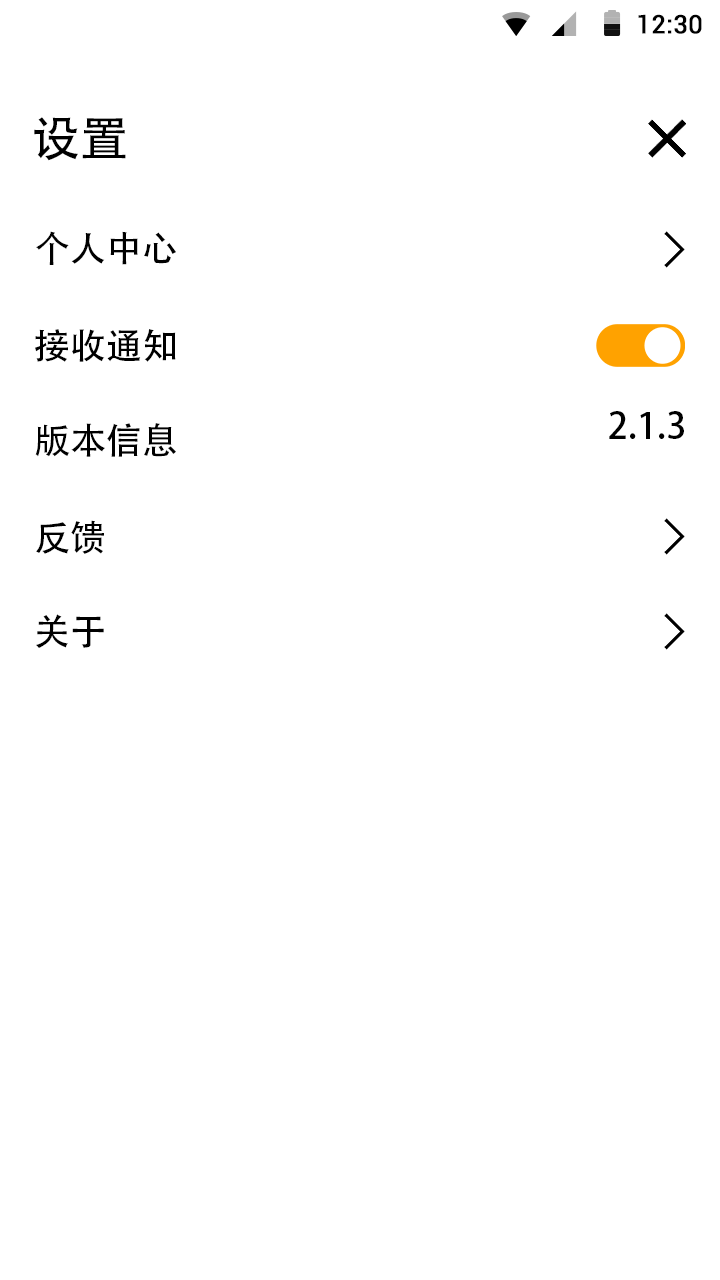
<style>
.page{position:relative;width:720px;height:1280px;background:#ffffff}
.page>*{position:absolute;margin:0}
.t1{font:25.4px "Roboto-Regular";color:#000000;font-weight:bold}
.t2{font:48px "AdobeHeitiStd-Regular";letter-spacing:-0.004em;color:#000000}
.t3{font:36px "AdobeHeitiStd-Regular";letter-spacing:-0.004em;color:#000000}
</style>
<div class="page">
<p class="t1" style="left:638px;top:14px;width:64px;height:20px">12:30</p>
<p class="t2" style="left:34px;top:117px;width:92px;height:44px">设置</p>
<p class="t3" style="left:36px;top:231px;width:140px;height:34px">个人中心</p>
<p class="t3" style="left:35px;top:329px;width:141px;height:33px">接收通知</p>
<p class="t3" style="left:609px;top:411px;width:75px;height:28px">2.1.3</p>
<p class="t3" style="left:35px;top:423px;width:141px;height:34px">版本信息</p>
<p class="t3" style="left:36px;top:520px;width:68px;height:34px">反馈</p>
<p class="t3" style="left:36px;top:614px;width:68px;height:34px">关于</p>
</div>
